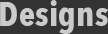
<style>
.page{position:relative;width:108px;height:34px;background:#333333}
.page>*{position:absolute;margin:0}
.t1{font:34.3px "AvenirNextCondensed-Bold";color:#cbcbcb}
</style>
<div class="page">
<p class="t1" style="left:0px;top:0px;width:108px;height:34px">Designs</p>
</div>
